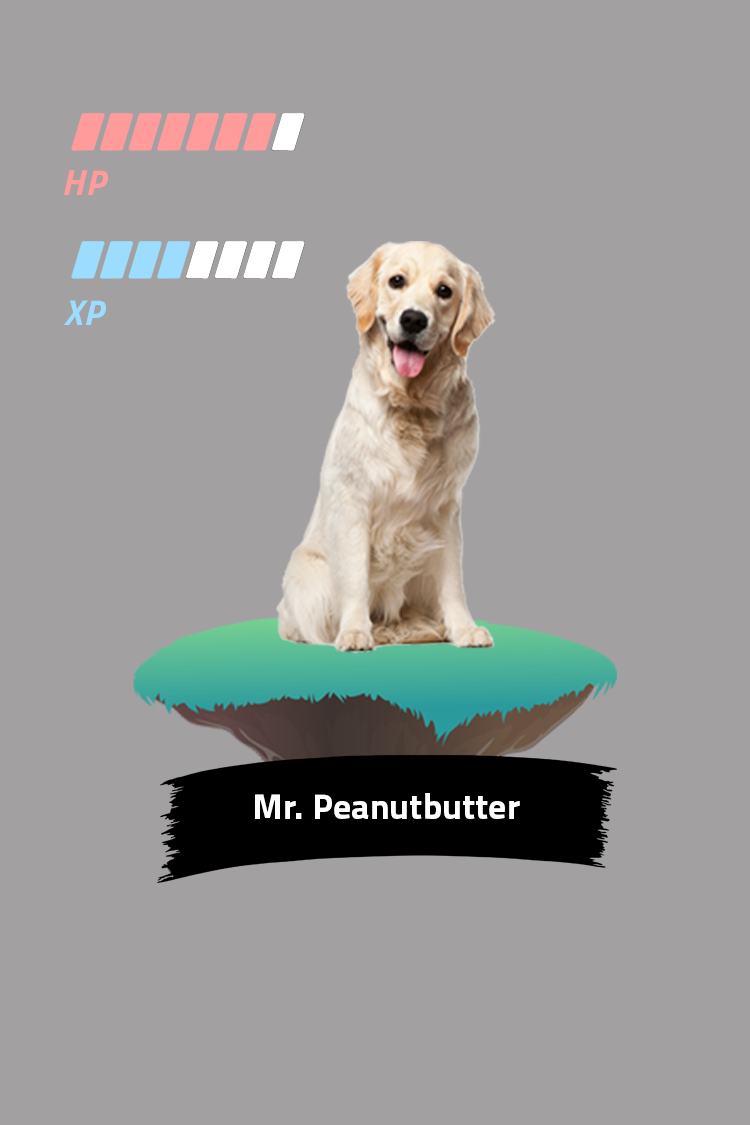
<style>
.page{position:relative;width:750px;height:1125px;background:#a2a0a1}
.page>*{position:absolute;margin:0}
.t1{font:36px "Titillium-BoldItalic";color:#ff9b9b}
.t2{font:36px "Titillium-Bold";color:#ffffff}
</style>
<div class="page">
<p class="t1" style="left:64px;top:170px;width:44px;height:25px">HP</p>
<p class="t2" style="left:255px;top:793px;width:265px;height:26px">Mr. Peanutbutter</p>
</div>
